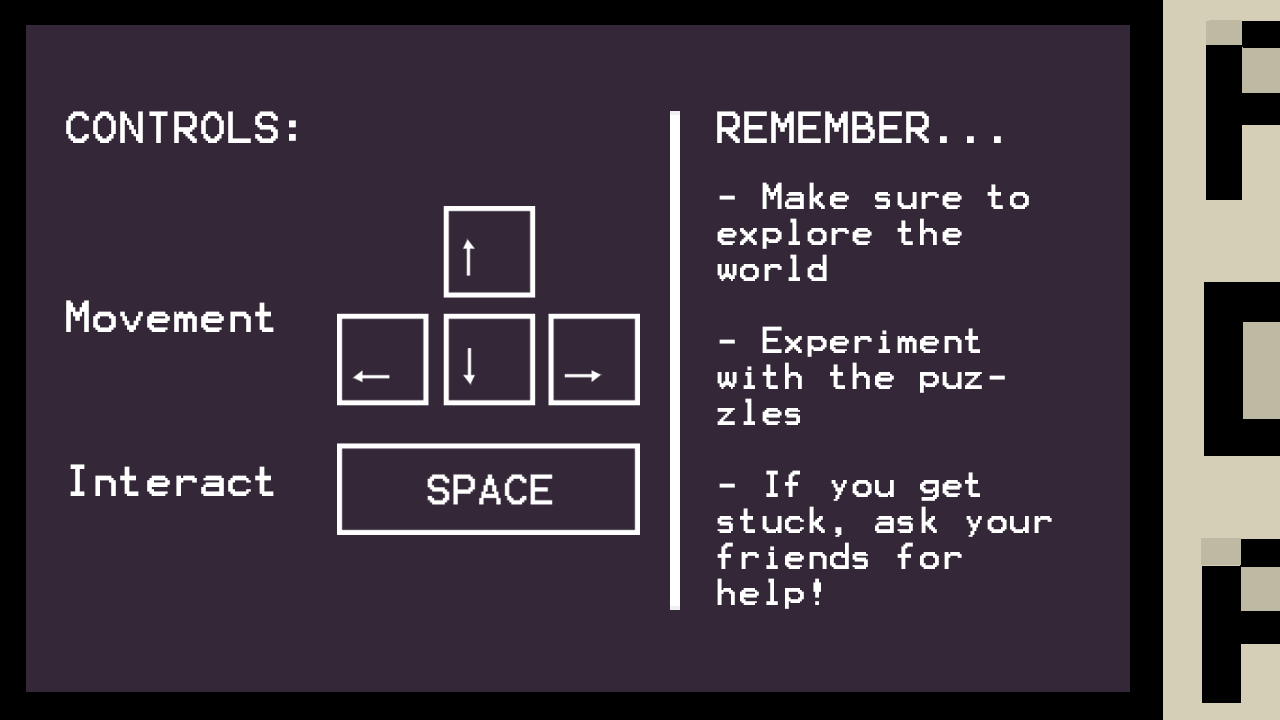
<style>
.page{position:relative;width:1280px;height:720px;background:#342838}
.page>*{position:absolute;margin:0}
.t1{font:36px "Terminal";color:#ffffff}
.t2{font:30px "Terminal";color:#ffffff}
</style>
<div class="page">
<p class="t1" style="left:66px;top:111px;width:230px;height:32px">CONTROLS:</p>
<p class="t1" style="left:717px;top:111px;width:284px;height:32px">REMEMBER...</p>
<p class="t2" style="left:717px;top:182px;width:335px;height:427px">- Make sure to explore the world<br><br>- Experiment with the puzzles<br><br>- If you get stuck, ask your friends for help!</p>
<p class="t1" style="left:66px;top:300px;width:208px;height:32px">Movement</p>
<p class="t1" style="left:70px;top:464px;width:204px;height:32px">Interact</p>
</div>
